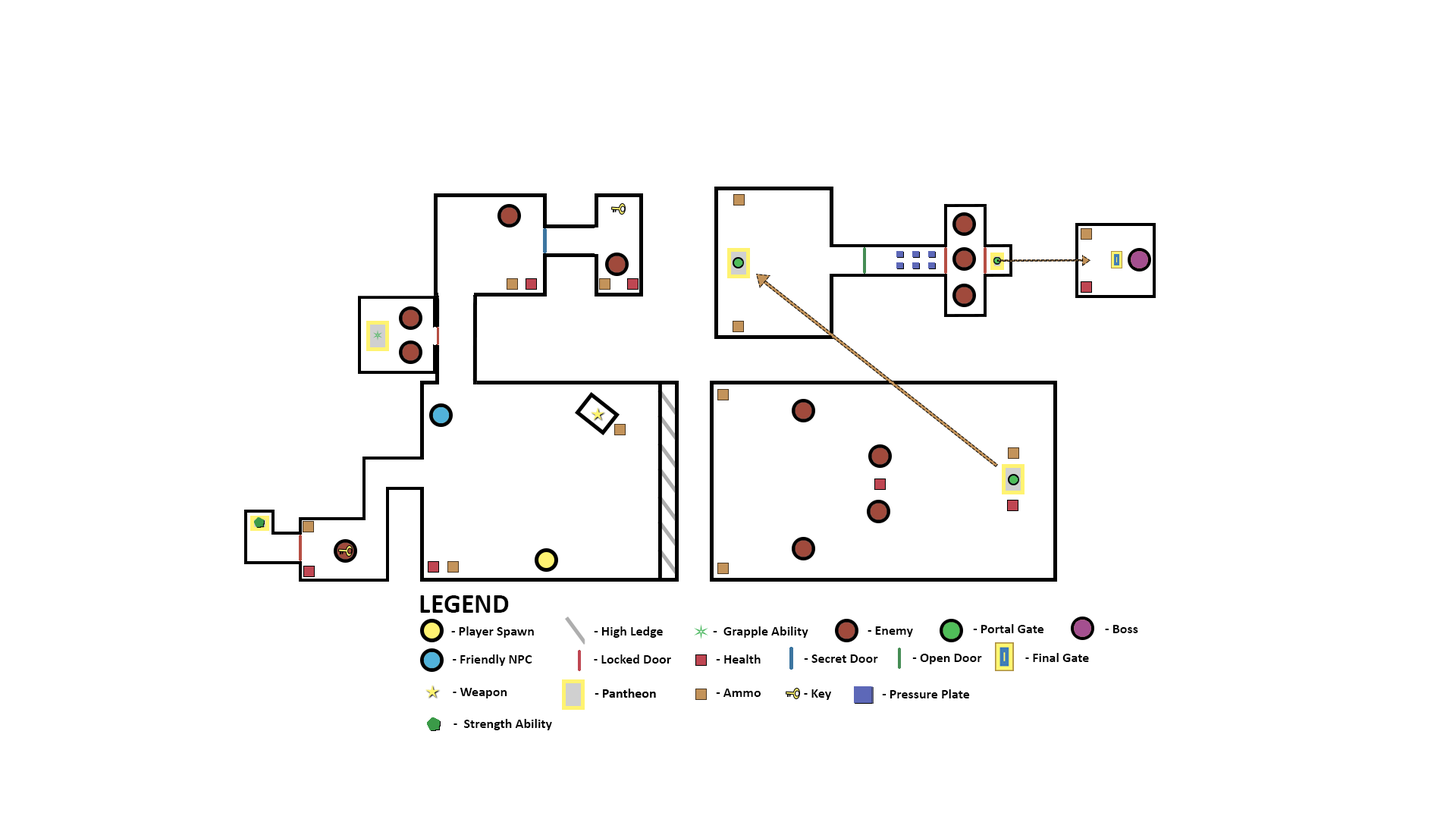
<style>
.page{position:relative;width:1456px;height:819px;background:#ffffff}
.page>*{position:absolute;margin:0}
.t1{font:27.3px "Calibri-Bold";color:#000000}
.t2{font:13.6px "Calibri-Bold";color:#000000}
</style>
<div class="page">
<p class="t1" style="left:420px;top:595px;width:89px;height:18px">LEGEND</p>
<p class="t2" style="left:451px;top:626px;width:83px;height:12px">- Player Spawn</p>
<p class="t2" style="left:594px;top:626px;width:69px;height:12px">- High Ledge</p>
<p class="t2" style="left:713px;top:626px;width:95px;height:12px">-  Grapple Ability</p>
<p class="t2" style="left:868px;top:626px;width:45px;height:11px">- Enemy</p>
<p class="t2" style="left:973px;top:624px;width:71px;height:9px">- Portal Gate</p>
<p class="t2" style="left:1105px;top:625px;width:33px;height:8px">- Boss</p>
<p class="t2" style="left:912px;top:654px;width:70px;height:10px">- Open Door</p>
<p class="t2" style="left:1025px;top:653px;width:64px;height:9px">- Final Gate</p>
<p class="t2" style="left:453px;top:654px;width:79px;height:12px">- Friendly NPC</p>
<p class="t2" style="left:594px;top:654px;width:77px;height:10px">- Locked Door</p>
<p class="t2" style="left:716px;top:654px;width:45px;height:10px">- Health</p>
<p class="t2" style="left:804px;top:654px;width:74px;height:9px">- Secret Door</p>
<p class="t2" style="left:453px;top:688px;width:54px;height:10px">- Weapon</p>
<p class="t2" style="left:716px;top:689px;width:45px;height:8px">- Ammo</p>
<p class="t2" style="left:804px;top:689px;width:27px;height:11px">- Key</p>
<p class="t2" style="left:882px;top:689px;width:88px;height:9px">- Pressure Plate</p>
<p class="t2" style="left:453px;top:719px;width:99px;height:11px">-  Strength Ability</p>
</div>
